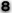
<style>
.page{position:relative;width:12px;height:13px}
.page>*{position:absolute;margin:0}
.t1{font:13.9px "K2D-ExtraBold";color:#000000}
</style>
<div class="page">
<p class="t1" style="left:1px;top:1px;width:9px;height:11px">8</p>
</div>
